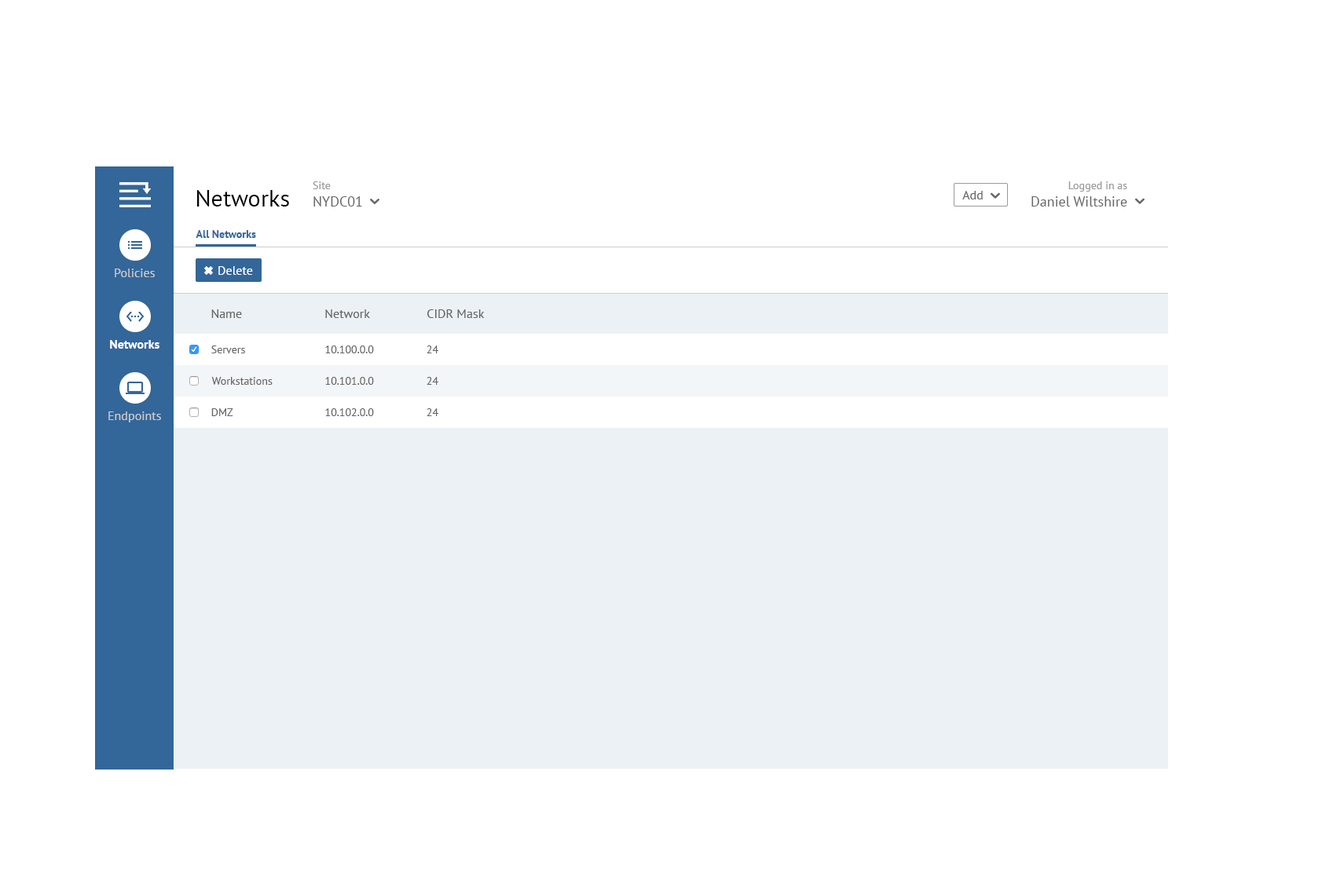
<style>
.page{position:relative;width:1337px;height:892px;background:#ffffff}
.page>*{position:absolute;margin:0}
.t1{font:14.1px "PTSans-Regular";color:#666666}
.t2{font:11px "PTSans-Regular";color:#999999}
.t3{font:14.3px "PTSans-Regular";color:#666666}
.t4{font:11.1px "PTSans-Regular";color:#999999}
.t5{font:23.6px "PTSans-Regular";color:#000000}
.t6{font:12.6px "PTSans-Regular";color:#666666}
.t7{font:10.9px "PTSans-Bold";color:#336699}
.t8{font:12.6px "PTSans-Regular";color:#cccccc}
.t9{font:12.6px "PTSans-Regular";color:#ffffff}
.t10{font:12.6px "PTSans-Bold";color:#ffffff}
.t11{font:11px "PTSans-Regular";color:#666666}
</style>
<div class="page">
<p class="t1" style="left:313px;top:181px;width:49px;height:26px"><span class="t2">Site<br></span>NYDC01</p>
<p class="t3" style="left:1031px;top:181px;width:96px;height:26px;text-align:right"><span class="t4">Logged in as<br></span>Daniel Wiltshire</p>
<p class="t5" style="left:197px;top:190px;width:92px;height:17px">Networks</p>
<p class="t6" style="left:962px;top:191px;width:20px;height:8px">Add</p>
<p class="t7" style="left:196px;top:230px;width:60px;height:8px">All Networks</p>
<p class="t8" style="left:115px;top:269px;width:40px;height:8px">Policies</p>
<p class="t9" style="left:218px;top:266px;width:35px;height:9px">Delete</p>
<p class="t6" style="left:211px;top:309px;width:31px;height:9px">Name</p>
<p class="t6" style="left:325px;top:309px;width:45px;height:9px">Network</p>
<p class="t6" style="left:427px;top:309px;width:58px;height:9px">CIDR Mask</p>
<p class="t10" style="left:110px;top:340px;width:49px;height:9px">Networks</p>
<p class="t11" style="left:211px;top:346px;width:34px;height:7px">Servers</p>
<p class="t11" style="left:325px;top:346px;width:49px;height:7px">10.100.0.0</p>
<p class="t11" style="left:426px;top:346px;width:12px;height:7px">24</p>
<p class="t11" style="left:211px;top:377px;width:62px;height:8px">Workstations</p>
<p class="t11" style="left:325px;top:377px;width:49px;height:8px">10.101.0.0</p>
<p class="t11" style="left:426px;top:377px;width:12px;height:8px">24</p>
<p class="t8" style="left:108px;top:412px;width:53px;height:11px">Endpoints</p>
<p class="t11" style="left:211px;top:408px;width:22px;height:8px">DMZ</p>
<p class="t11" style="left:325px;top:408px;width:49px;height:8px">10.102.0.0</p>
<p class="t11" style="left:426px;top:408px;width:12px;height:8px">24</p>
</div>
